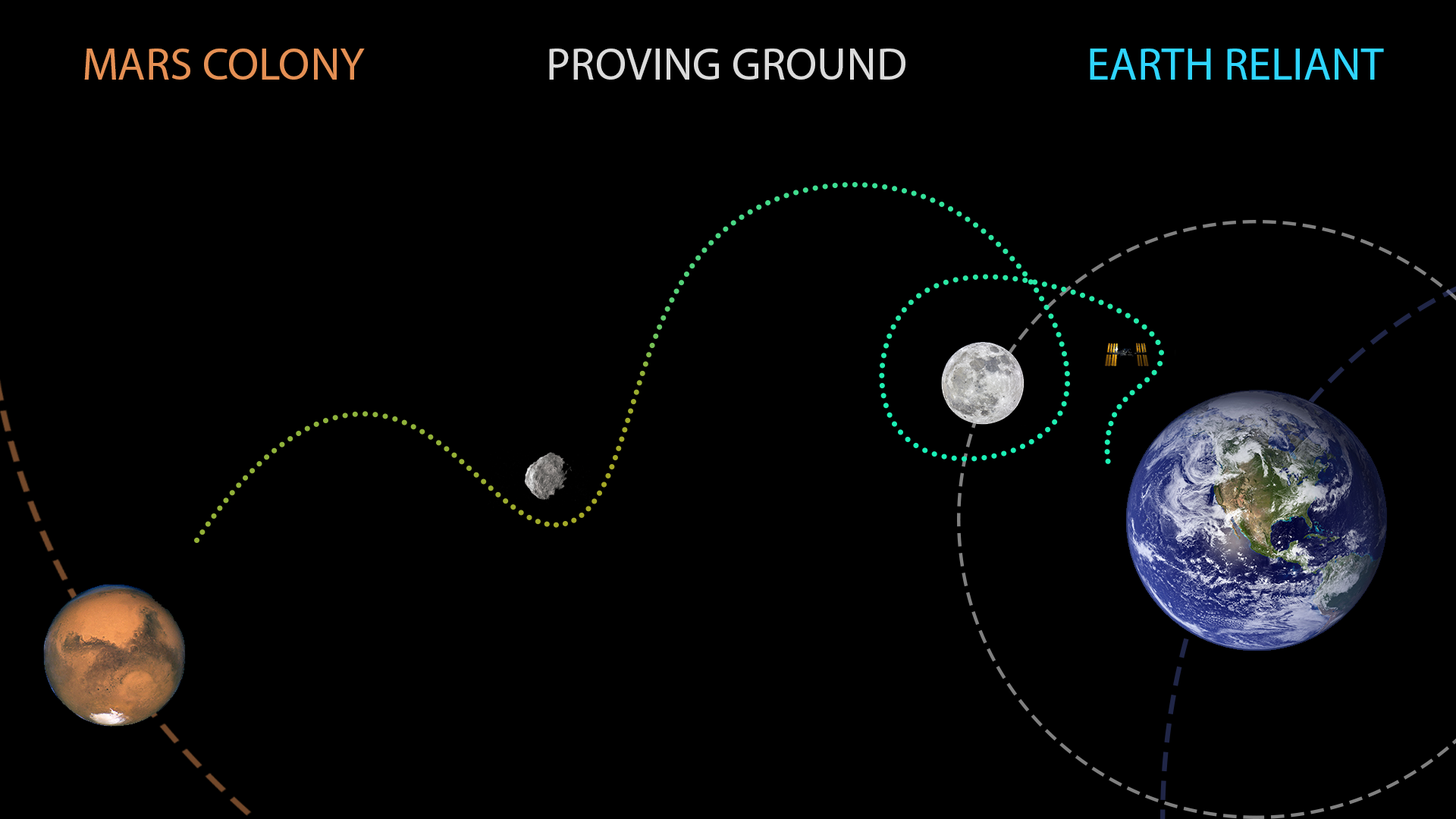
<style>
.page{position:relative;width:1456px;height:819px;background:#000000}
.page>*{position:absolute;margin:0}
.t1{font:45.5px "MyriadPro-Regular";color:#e59054}
.t2{font:45.5px "MyriadPro-Regular";color:#dbdbdb}
.t3{font:45.5px "MyriadPro-Regular";color:#2fd5ff}
</style>
<div class="page">
<p class="t1" style="left:84px;top:49px;width:281px;height:31px">MARS COLONY</p>
<p class="t2" style="left:549px;top:49px;width:356px;height:31px">PROVING GROUND</p>
<p class="t3" style="left:1090px;top:49px;width:294px;height:31px">EARTH RELIANT</p>
</div>
